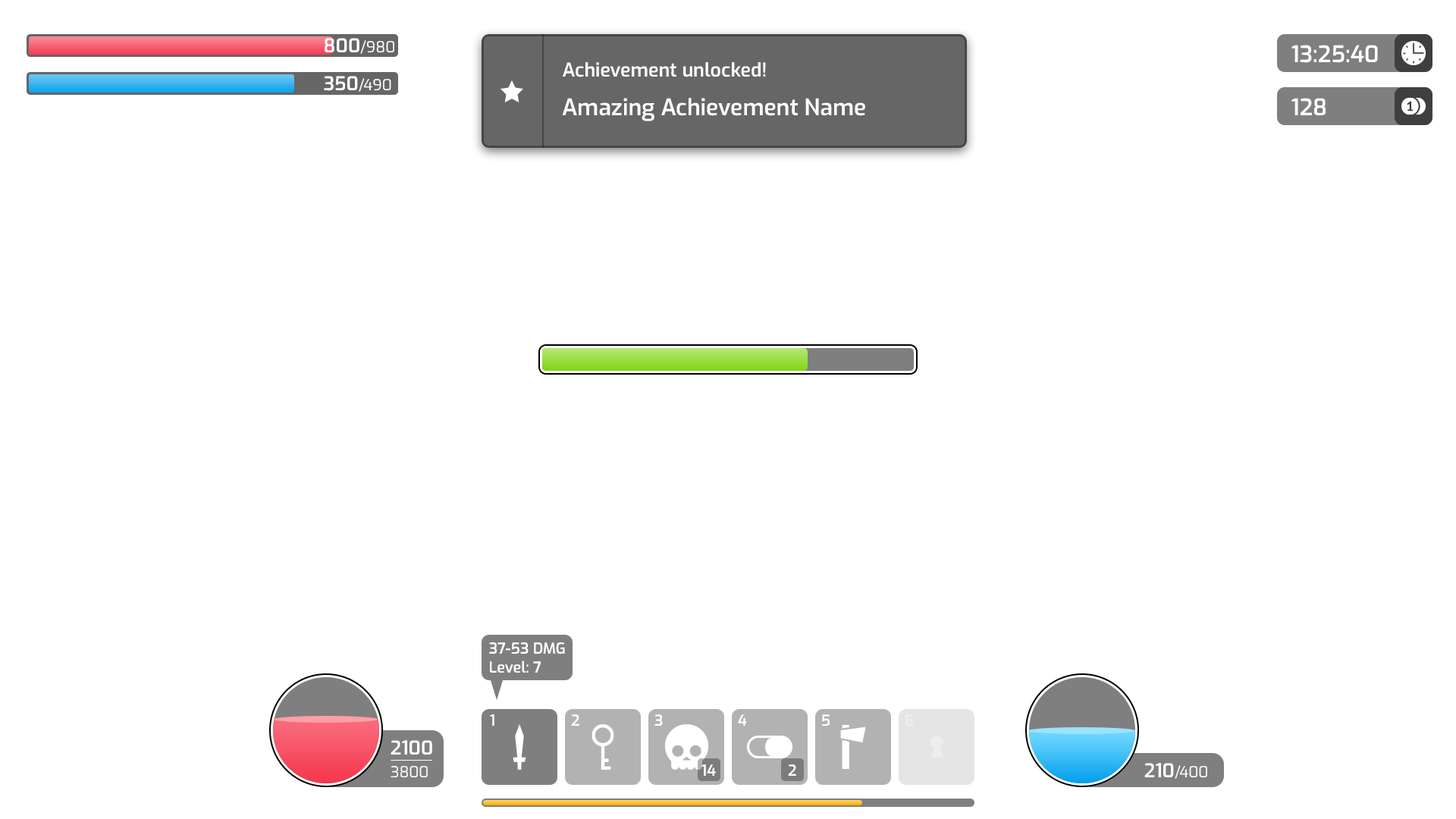
<style>
.page{position:relative;width:1456px;height:819px;background:#ffffff}
.page>*{position:absolute;margin:0}
.t1{font:15.2px "Exo-Regular";color:#ffffff}
.t2{font:19px "Exo-SemiBold";color:#ffffff}
.t3{font:22.7px "Exo-SemiBold";color:#ffffff}
.t4{font:15.2px "Exo-SemiBold";color:#ffffff}
.t5{font:19px/22.7px "Exo-SemiBold";color:#ffffff}
.t6{font:15.2px/22.7px "Exo-Regular";color:#ffffff}
</style>
<div class="page">
<p class="t1" style="left:325px;top:38px;width:69px;height:16px"><span class="t2">800</span>/980</p>
<p class="t3" style="left:1291px;top:45px;width:87px;height:18px">13:25:40</p>
<p class="t2" style="left:563px;top:62px;width:203px;height:15px">Achievement unlocked!</p>
<p class="t1" style="left:324px;top:76px;width:67px;height:16px"><span class="t2">350</span>/490</p>
<p class="t3" style="left:562px;top:98px;width:303px;height:23px">Amazing Achievement Name</p>
<p class="t3" style="left:1291px;top:98px;width:35px;height:17px">128</p>
<p class="t4" style="left:489px;top:642px;width:76px;height:12px">37-53 DMG</p>
<p class="t4" style="left:490px;top:660px;width:51px;height:13px">Level: 7</p>
<p class="t4" style="left:490px;top:714px;width:4px;height:12px">1</p>
<p class="t4" style="left:571px;top:714px;width:8px;height:12px">2</p>
<p class="t4" style="left:654px;top:714px;width:9px;height:12px">3</p>
<p class="t4" style="left:738px;top:714px;width:9px;height:12px">4</p>
<p class="t4" style="left:822px;top:714px;width:8px;height:12px">5</p>
<p class="t4" style="left:905px;top:714px;width:8px;height:12px;opacity:0.3">6</p>
<p class="t5" style="left:391px;top:740px;width:41px;height:38px">2100<br><span class="t6">3800</span></p>
<p class="t4" style="left:701px;top:764px;width:15px;height:12px">14</p>
<p class="t4" style="left:788px;top:764px;width:8px;height:12px">2</p>
<p class="t1" style="left:1144px;top:763px;width:63px;height:16px"><span class="t2">210</span>/400</p>
</div>
